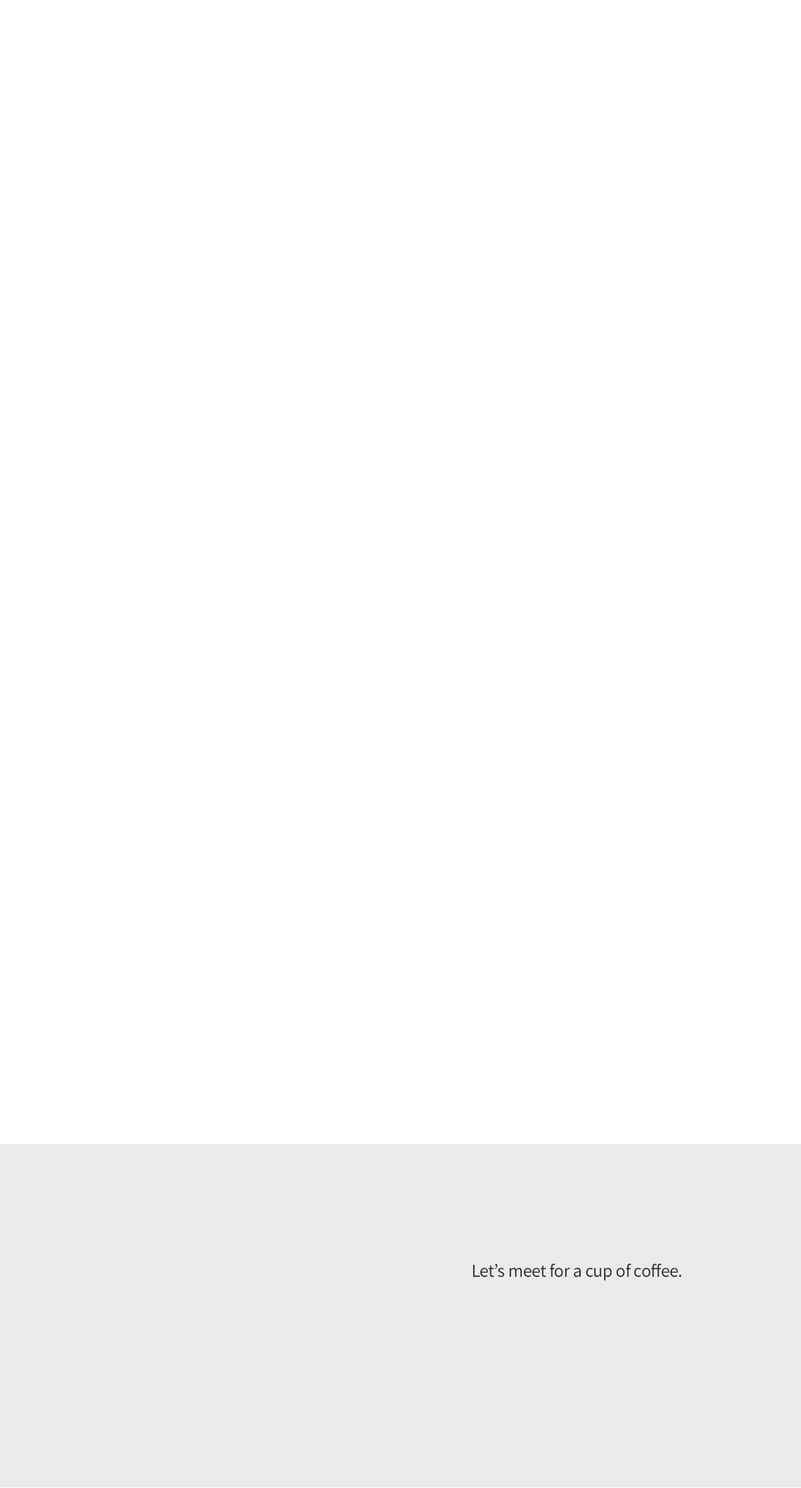
<style>
.page{position:relative;width:801px;height:1488px;background:#ffffff}
.page>*{position:absolute;margin:0}
.t1{font:18.3px "SourceSansPro-Regular";letter-spacing:-0.02em;color:#2b2b2b}
</style>
<div class="page">
<p class="t1" style="left:473px;top:1264px;width:209px;height:17px">Let’s meet for a cup of coffee.</p>
</div>
